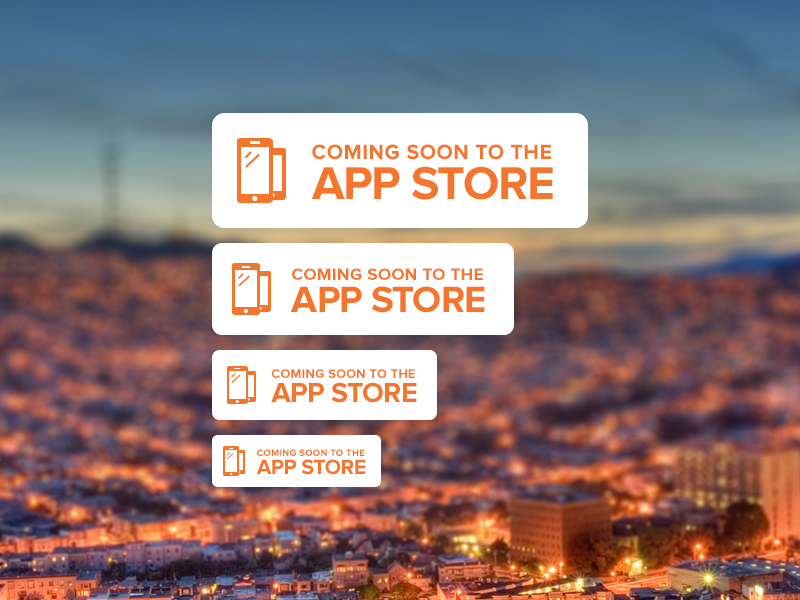
<style>
.page{position:relative;width:800px;height:600px}
.page>*{position:absolute;margin:0}
.t1{font:21.2px/40px "ProximaNova-Bold";letter-spacing:0.025em;color:#f4752c;text-transform:uppercase}
.t2{font:47.5px/40px "ProximaNova-Bold";letter-spacing:-0.025em;color:#f4752c;text-transform:uppercase}
.t3{font:17px/32px "ProximaNova-Bold";letter-spacing:0.025em;color:#f4752c;text-transform:uppercase}
.t4{font:38px/32px "ProximaNova-Bold";letter-spacing:-0.025em;color:#f4752c;text-transform:uppercase}
.t5{font:12.8px/24px "ProximaNova-Bold";letter-spacing:0.025em;color:#f4752c;text-transform:uppercase}
.t6{font:28.5px/24px "ProximaNova-Bold";letter-spacing:-0.025em;color:#f4752c;text-transform:uppercase}
.t7{font:9.6px/18px "ProximaNova-Bold";letter-spacing:0.025em;color:#f4752c;text-transform:uppercase}
.t8{font:21.4px/18px "ProximaNova-Bold";letter-spacing:-0.025em;color:#f4752c;text-transform:uppercase}
</style>
<div class="page">
<p class="t1" style="left:311px;top:144px;width:242px;height:56px">Coming soon to the<br><span class="t2">app store</span></p>
<p class="t3" style="left:290px;top:268px;width:195px;height:45px">Coming soon to the<br><span class="t4">app store</span></p>
<p class="t5" style="left:271px;top:369px;width:146px;height:34px">Coming soon to the<br><span class="t6">app store</span></p>
<p class="t7" style="left:256px;top:449px;width:110px;height:26px">Coming soon to the<br><span class="t8">app store</span></p>
</div>
